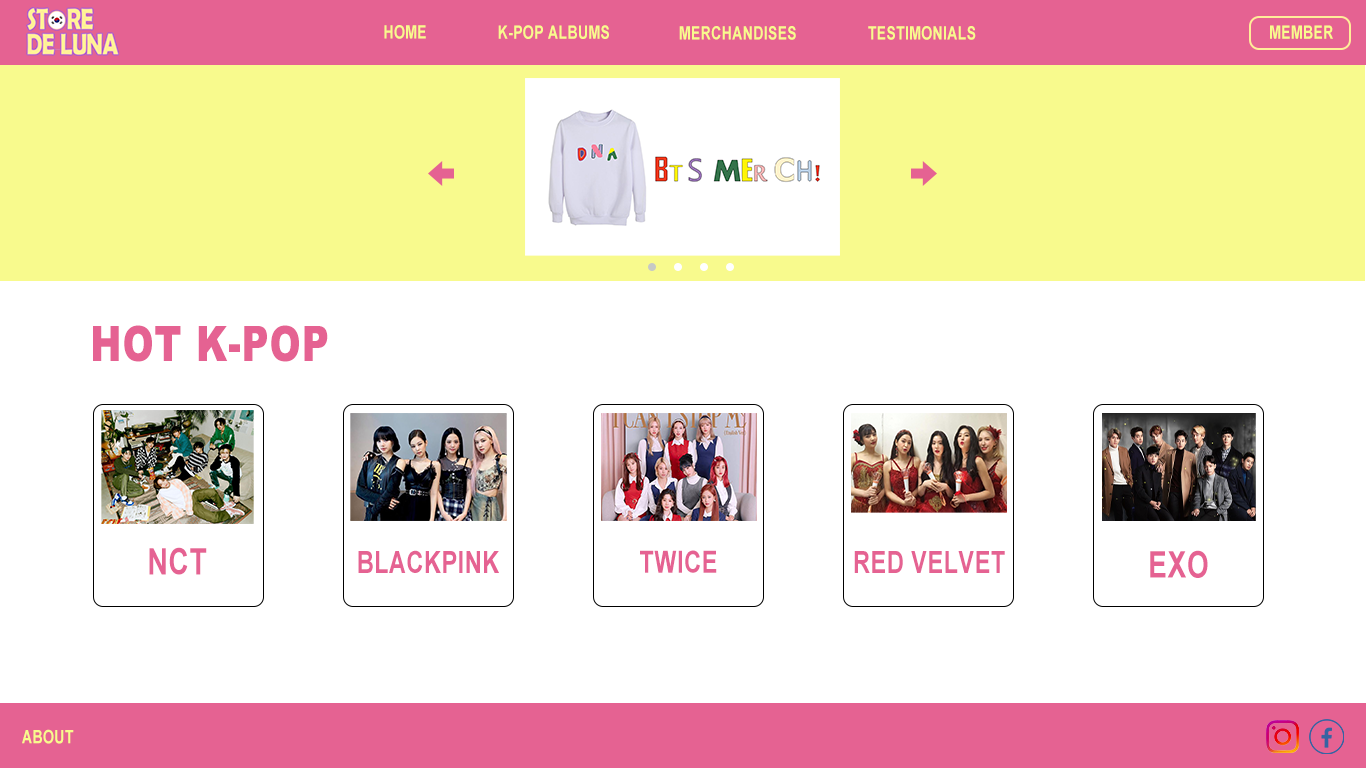
<style>
.page{position:relative;width:1366px;height:768px;background:#ffffff}
.page>*{position:absolute;margin:0}
.t1{font:18.4px "Arial-BoldMT";letter-spacing:0.025em;color:#f8fa8d;scale:0.76 1}
.t2{font:49px "Arial-Black";letter-spacing:0.025em;color:#e56292;scale:0.76 1}
.t3{font:36.7px "Arial-BoldMT";letter-spacing:0.025em;color:#e56292;scale:0.76 1}
.t4{font:30.6px "Arial-BoldMT";letter-spacing:0.025em;color:#e56292;scale:0.76 1}
</style>
<div class="page">
<p class="t1" style="left:384px;top:25px;width:42px;height:14px">HOME</p>
<p class="t1" style="left:498px;top:25px;width:111px;height:14px">K-POP ALBUMS</p>
<p class="t1" style="left:679px;top:26px;width:117px;height:14px">MERCHANDISES</p>
<p class="t1" style="left:868px;top:26px;width:108px;height:14px">TESTIMONIALS</p>
<p class="t1" style="left:1270px;top:25px;width:63px;height:14px">MEMBER</p>
<p class="t2" style="left:93px;top:325px;width:235px;height:37px">HOT K-POP</p>
<p class="t3" style="left:149px;top:547px;width:58px;height:28px">NCT</p>
<p class="t4" style="left:358px;top:550px;width:141px;height:23px">BLACKPINK</p>
<p class="t4" style="left:640px;top:550px;width:77px;height:23px">TWICE</p>
<p class="t4" style="left:854px;top:551px;width:151px;height:22px">RED VELVET</p>
<p class="t3" style="left:1150px;top:550px;width:58px;height:28px">EXO</p>
<p class="t1" style="left:22px;top:729px;width:52px;height:15px">ABOUT</p>
</div>
